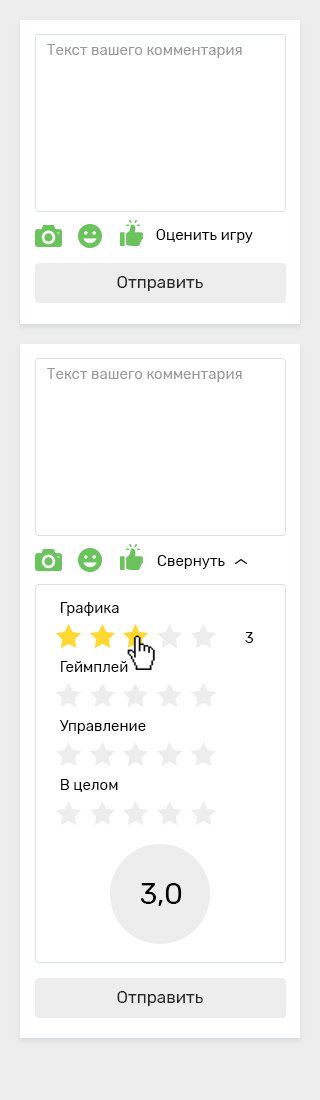
<style>
.page{position:relative;width:320px;height:1100px;background:#ffffff}
.page>*{position:absolute;margin:0}
.t1{font:15px "Rubik-Regular";color:#999999}
.t2{font:15px "Rubik-Regular";color:#000000}
.t3{font:17px "Rubik-Regular";color:#272727}
.t4{font:30px "Rubik-Regular";color:#000000}
</style>
<div class="page">
<p class="t1" style="left:47px;top:44px;width:195px;height:14px">Текст вашего комментария</p>
<p class="t2" style="left:156px;top:229px;width:97px;height:14px">Оценить игру</p>
<p class="t3" style="left:117px;top:276px;width:86px;height:15px">Отправить</p>
<p class="t1" style="left:47px;top:368px;width:195px;height:14px">Текст вашего комментария</p>
<p class="t2" style="left:157px;top:555px;width:68px;height:14px">Свернуть</p>
<p class="t2" style="left:60px;top:602px;width:59px;height:14px">Графика</p>
<p class="t2" style="left:245px;top:632px;width:9px;height:11px">3</p>
<p class="t2" style="left:61px;top:661px;width:67px;height:11px">Геймплей</p>
<p class="t2" style="left:59px;top:720px;width:87px;height:14px">Управление</p>
<p class="t2" style="left:61px;top:779px;width:57px;height:13px">В целом</p>
<p class="t4" style="left:140px;top:883px;width:42px;height:23px">3,0</p>
<p class="t3" style="left:117px;top:991px;width:86px;height:15px">Отправить</p>
</div>
